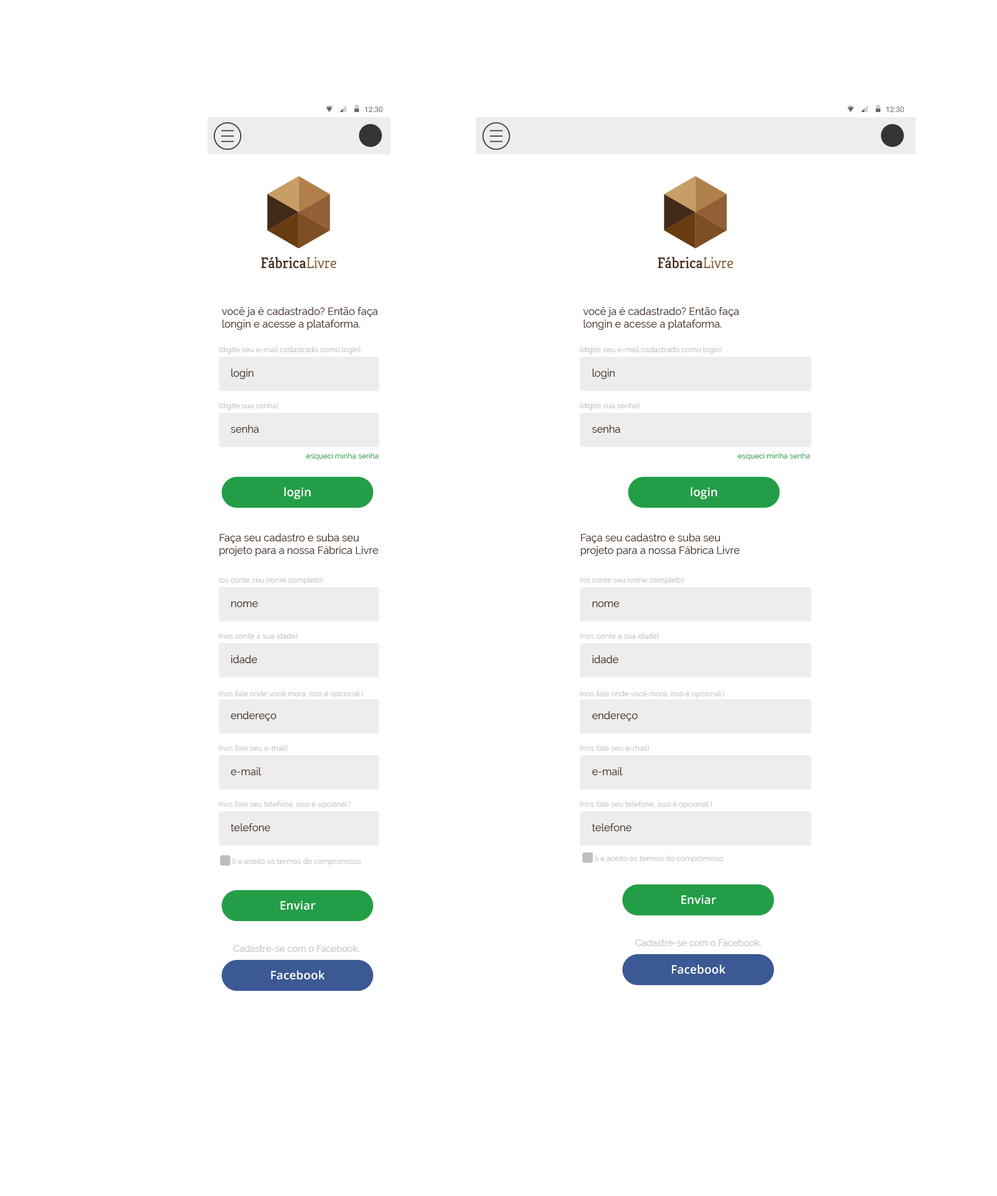
<style>
.page{position:relative;width:997px;height:1196px;background:#ffffff}
.page>*{position:absolute;margin:0}
.t1{font:10.3px "Raleway";color:#422918}
.t2{font:7.4px "Raleway";color:#bebebe}
.t3{font:7.4px "Raleway";color:#239e46}
.t4{font:11.7px "OpenSans-Semibold";letter-spacing:0.01em;color:#ffffff}
.t5{font:9.1px "Raleway";color:#bebebe}
</style>
<div class="page">
<p class="t1" style="left:222px;top:307px;width:156px;height:23px">você ja é cadastrado? Então faça longin e acesse a plataforma.</p>
<p class="t1" style="left:583px;top:307px;width:156px;height:23px">você ja é cadastrado? Então faça longin e acesse a plataforma.</p>
<p class="t2" style="left:218px;top:346px;width:143px;height:8px">(digite seu e-mail cadastrado como login)</p>
<p class="t2" style="left:580px;top:346px;width:142px;height:8px">(digite seu e-mail cadastrado como login)</p>
<p class="t1" style="left:231px;top:369px;width:23px;height:10px">login</p>
<p class="t1" style="left:592px;top:369px;width:23px;height:10px">login</p>
<p class="t2" style="left:218px;top:402px;width:60px;height:8px">(digite sua senha)</p>
<p class="t2" style="left:580px;top:402px;width:60px;height:8px">(digite sua senha)</p>
<p class="t1" style="left:230px;top:425px;width:29px;height:8px">senha</p>
<p class="t1" style="left:592px;top:425px;width:28px;height:8px">senha</p>
<p class="t3" style="left:306px;top:453px;width:72px;height:7px">esqueci minha senha</p>
<p class="t3" style="left:737px;top:453px;width:73px;height:7px">esqueci minha senha</p>
<p class="t4" style="left:284px;top:487px;width:27px;height:12px">login</p>
<p class="t4" style="left:691px;top:487px;width:26px;height:12px">login</p>
<p class="t1" style="left:220px;top:533px;width:158px;height:23px">Faça seu cadastro e suba seu projeto para a nossa Fábrica Livre</p>
<p class="t1" style="left:581px;top:533px;width:159px;height:23px">Faça seu cadastro e suba seu projeto para a nossa Fábrica Livre</p>
<p class="t2" style="left:218px;top:577px;width:105px;height:7px">(os conte seu nome completo)</p>
<p class="t2" style="left:580px;top:577px;width:104px;height:7px">(os conte seu nome completo)</p>
<p class="t1" style="left:231px;top:601px;width:27px;height:6px">nome</p>
<p class="t1" style="left:592px;top:601px;width:28px;height:6px">nome</p>
<p class="t2" style="left:218px;top:633px;width:80px;height:6px">(nos conte a sua idade)</p>
<p class="t2" style="left:580px;top:633px;width:79px;height:6px">(nos conte a sua idade)</p>
<p class="t1" style="left:231px;top:655px;width:26px;height:8px">idade</p>
<p class="t1" style="left:592px;top:655px;width:27px;height:8px">idade</p>
<p class="t2" style="left:218px;top:691px;width:146px;height:7px">(nos fale onde você mora, isso é opcional.)</p>
<p class="t2" style="left:580px;top:691px;width:145px;height:7px">(nos fale onde você mora, isso é opcional.)</p>
<p class="t1" style="left:231px;top:711px;width:46px;height:10px">endereço</p>
<p class="t1" style="left:592px;top:711px;width:46px;height:10px">endereço</p>
<p class="t2" style="left:218px;top:745px;width:70px;height:6px">(nos fale seu e-mail)</p>
<p class="t2" style="left:580px;top:745px;width:69px;height:6px">(nos fale seu e-mail)</p>
<p class="t1" style="left:231px;top:767px;width:30px;height:8px">e-mail</p>
<p class="t1" style="left:592px;top:767px;width:31px;height:8px">e-mail</p>
<p class="t2" style="left:218px;top:801px;width:133px;height:7px">(nos fale seu telefone, isso é opcional )</p>
<p class="t2" style="left:580px;top:801px;width:132px;height:7px">(nos fale seu telefone, isso é opcional )</p>
<p class="t1" style="left:230px;top:823px;width:40px;height:8px">telefone</p>
<p class="t1" style="left:592px;top:823px;width:40px;height:8px">telefone</p>
<p class="t2" style="left:595px;top:855px;width:128px;height:8px">li e aceito os termos do compromisso</p>
<p class="t2" style="left:233px;top:858px;width:128px;height:8px">li e aceito os termos do compromisso</p>
<p class="t4" style="left:281px;top:900px;width:35px;height:10px">Enviar</p>
<p class="t4" style="left:681px;top:895px;width:35px;height:9px">Enviar</p>
<p class="t5" style="left:635px;top:939px;width:126px;height:7px">Cadastre-se com o Facebook.</p>
<p class="t5" style="left:233px;top:945px;width:126px;height:7px">Cadastre-se com o Facebook.</p>
<p class="t4" style="left:672px;top:964px;width:53px;height:10px">Facebook</p>
<p class="t4" style="left:271px;top:970px;width:54px;height:10px">Facebook</p>
</div>
